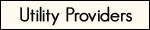
<style>
.page{position:relative;width:150px;height:30px;background:#fffaf0}
.page>*{position:absolute;margin:0}
.t1{font:19px "GeosansLight";color:#000000;font-weight:bold}
</style>
<div class="page">
<p class="t1" style="left:20px;top:6px;width:112px;height:20px">Utility Providers</p>
</div>
